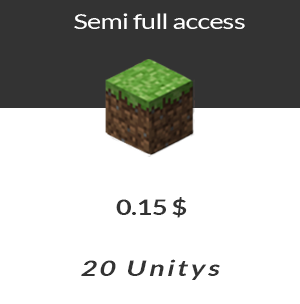
<style>
.page{position:relative;width:300px;height:304px;background:#ffffff}
.page>*{position:absolute;margin:0}
.t1{font:21.3px "Lato-Regular";letter-spacing:-0.025em;color:#ffffff;scale:1.26 1}
.t2{font:21.6px "Lato-Bold";letter-spacing:-0.025em;color:#333333;scale:1.26 1}
.t3{font:21.6px "Lato-Bold";letter-spacing:0.1em;color:#333333;font-style:italic;scale:1.26 1}
</style>
<div class="page">
<p class="t1" style="left:74px;top:13px;width:171px;height:16px">Semi full access</p>
<p class="t2" style="left:116px;top:197px;width:71px;height:21px">0.15 $</p>
<p class="t3" style="left:81px;top:259px;width:139px;height:21px">20 Unitys</p>
</div>
